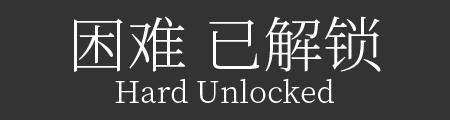
<style>
.page{position:relative;width:450px;height:120px;background:#333333}
.page>*{position:absolute;margin:0}
.t1{font:60px "SourceHanSerifCN-Light";color:#ffffff}
.t2{font:30px "SourceHanSerifCN-Light";color:#ffffff}
</style>
<div class="page">
<p class="t1" style="left:74px;top:16px;width:307px;height:56px">困难 已解锁</p>
<p class="t2" style="left:115px;top:78px;width:220px;height:25px">Hard Unlocked</p>
</div>
